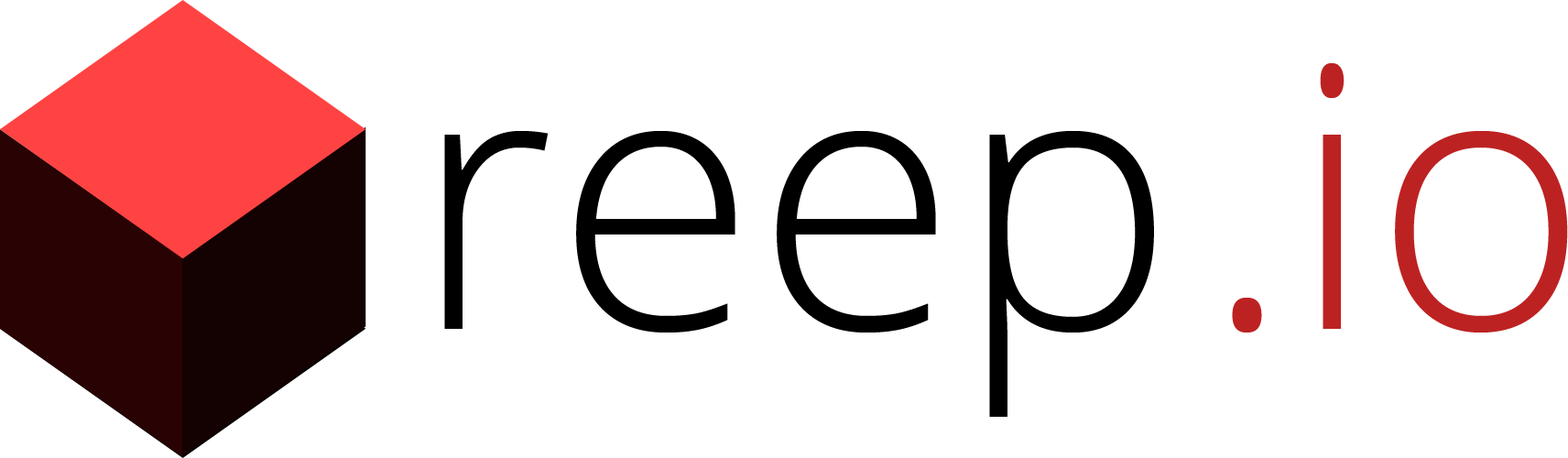
<style>
.page{position:relative;width:1568px;height:458px;background:#ffffff}
.page>*{position:absolute;margin:0}
.t1{font:366.4px "OpenSans-Light";color:#bd2222}
.t2{font:366.4px "OpenSans-Light";color:#000000}
</style>
<div class="page">
<p class="t1" style="left:1232px;top:63px;width:336px;height:269px">.io</p>
<p class="t2" style="left:444px;top:131px;width:710px;height:286px">reep</p>
</div>
